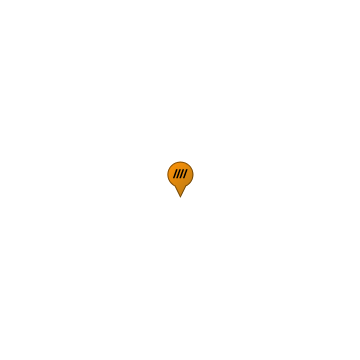
<style>
.page{position:relative;width:360px;height:360px;background:#ffffff}
.page>*{position:absolute;margin:0}
.t1{font:12px "Helvetica-Bold";color:#000000}
</style>
<div class="page">
<p class="t1" style="left:173px;top:169px;width:15px;height:10px">////</p>
</div>
